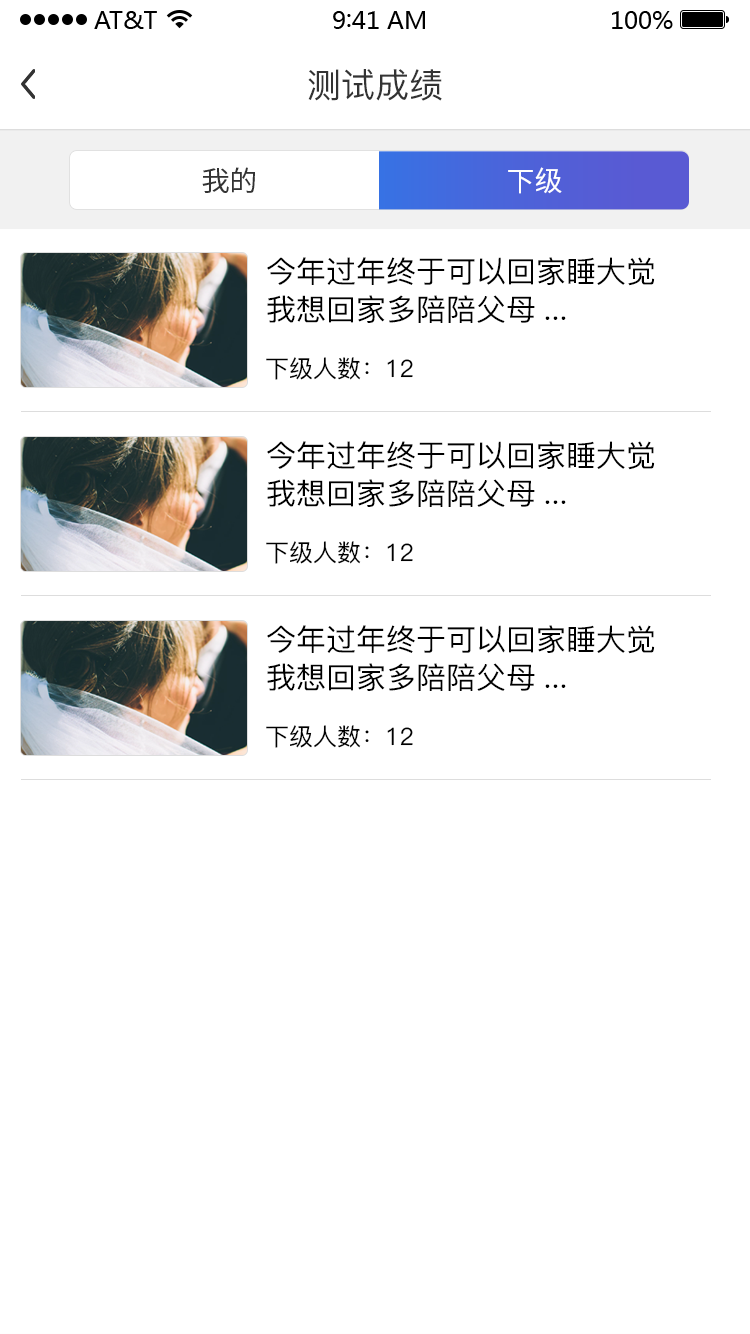
<style>
.page{position:relative;width:750px;height:1334px;background:#ffffff}
.page>*{position:absolute;margin:0}
.t1{font:34px "PingFang-SC-Medium";color:#333333}
.t2{font:28px "SourceHanSansCN-Regular";color:#333333}
.t3{font:28px "SourceHanSansCN-Regular";color:#ffffff}
.t4{font:30px/38px "PingFang-SC-Medium";color:#000000}
.t5{font:24px "PingFang-SC-Medium";color:#000000}
</style>
<div class="page">
<p class="t1" style="left:308px;top:69px;width:134px;height:32px">测试成绩</p>
<p class="t2" style="left:202px;top:167px;width:53px;height:26px">我的</p>
<p class="t3" style="left:508px;top:167px;width:54px;height:27px">下级</p>
<p class="t4" style="left:267px;top:257px;width:388px;height:66px">今年过年终于可以回家睡大觉<br>我想回家多陪陪父母...</p>
<p class="t5" style="left:266px;top:357px;width:147px;height:23px">下级人数：12</p>
<p class="t4" style="left:267px;top:441px;width:388px;height:66px">今年过年终于可以回家睡大觉<br>我想回家多陪陪父母...</p>
<p class="t5" style="left:266px;top:541px;width:147px;height:23px">下级人数：12</p>
<p class="t4" style="left:267px;top:625px;width:388px;height:66px">今年过年终于可以回家睡大觉<br>我想回家多陪陪父母...</p>
<p class="t5" style="left:266px;top:725px;width:147px;height:23px">下级人数：12</p>
</div>
